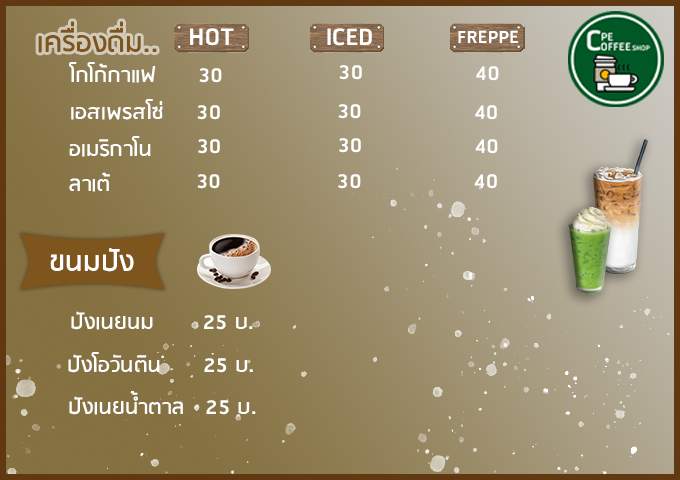
<style>
.page{position:relative;width:680px;height:480px}
.page>*{position:absolute;margin:0}
.t1{font:33.3px "RSU-Bold";color:#7d551d}
.t2{font:29.8px "RSU-Bold";color:#ffffff}
.t3{font:22.4px "RSU-Bold";color:#ffffff}
.t4{font:25px "RSU-Bold";color:#ffffff}
.t5{font:33.3px "RSU-Bold";color:#ffffff}
</style>
<div class="page">
<p class="t1" style="left:38px;top:21px;width:119px;height:32px">เครื่องดื่ม..</p>
<p class="t2" style="left:190px;top:28px;width:44px;height:18px">HOT</p>
<p class="t2" style="left:327px;top:28px;width:45px;height:18px">ICED</p>
<p class="t3" style="left:458px;top:30px;width:60px;height:13px">FREPPE</p>
<p class="t4" style="left:69px;top:62px;width:153px;height:21px">โกโก้กาแฟ      30</p>
<p class="t4" style="left:339px;top:65px;width:23px;height:15px">30</p>
<p class="t4" style="left:476px;top:66px;width:23px;height:15px">40</p>
<p class="t4" style="left:71px;top:99px;width:92px;height:21px">เอสเพรสโซ่</p>
<p class="t4" style="left:197px;top:105px;width:23px;height:15px">30</p>
<p class="t4" style="left:338px;top:104px;width:23px;height:15px">30</p>
<p class="t4" style="left:475px;top:105px;width:22px;height:15px">40</p>
<p class="t4" style="left:69px;top:136px;width:82px;height:21px">อเมริกาโน</p>
<p class="t4" style="left:198px;top:139px;width:22px;height:15px">30</p>
<p class="t4" style="left:339px;top:138px;width:22px;height:15px">30</p>
<p class="t4" style="left:475px;top:139px;width:23px;height:15px">40</p>
<p class="t4" style="left:69px;top:172px;width:41px;height:20px">ลาเต้</p>
<p class="t4" style="left:197px;top:174px;width:23px;height:15px">30</p>
<p class="t4" style="left:338px;top:174px;width:23px;height:15px">30</p>
<p class="t4" style="left:474px;top:174px;width:23px;height:15px">40</p>
<p class="t5" style="left:50px;top:248px;width:84px;height:24px">ขนมปัง</p>
<p class="t4" style="left:71px;top:311px;width:182px;height:19px">ปังเนยนม       25 บ.</p>
<p class="t4" style="left:68px;top:352px;width:185px;height:21px">ปังโอวันติน      25 บ.</p>
<p class="t4" style="left:69px;top:391px;width:187px;height:24px">ปังเนยน้ำตาล   25 บ.</p>
</div>
